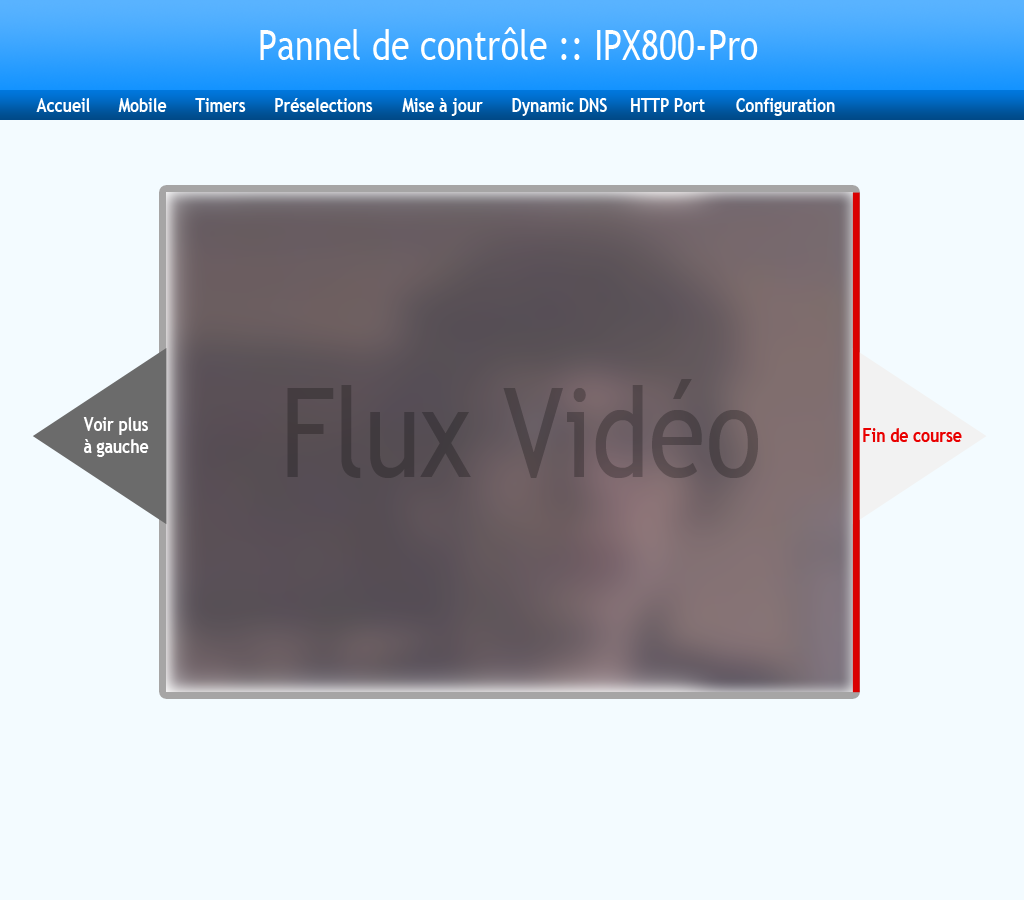
<style>
.page{position:relative;width:1024px;height:900px;background:#f3fbff}
.page>*{position:absolute;margin:0}
.t1{font:41.6px "TrebuchetMS";color:#ffffff;scale:0.82 1}
.t2{font:19.1px "TrebuchetMS-Bold";color:#ffffff;scale:0.82 1}
.t3{font:124.8px "TrebuchetMS";color:#4d4549;scale:0.82 1}
.t4{font:19.1px/21.9px "TrebuchetMS-Bold";color:#ffffff;scale:0.82 1}
.t5{font:19.1px "TrebuchetMS-Bold";color:#e90000;scale:0.82 1}
</style>
<div class="page">
<p class="t1" style="left:260px;top:27px;width:498px;height:33px">Pannel de contrôle :: IPX800-Pro</p>
<p class="t2" style="left:36px;top:98px;width:54px;height:14px">Accueil</p>
<p class="t2" style="left:118px;top:98px;width:49px;height:14px">Mobile</p>
<p class="t2" style="left:195px;top:98px;width:51px;height:14px">Timers</p>
<p class="t2" style="left:275px;top:98px;width:98px;height:14px">Préselections</p>
<p class="t2" style="left:402px;top:98px;width:81px;height:18px">Mise à jour</p>
<p class="t2" style="left:512px;top:98px;width:95px;height:18px">Dynamic DNS</p>
<p class="t2" style="left:631px;top:98px;width:74px;height:14px">HTTP Port</p>
<p class="t2" style="left:736px;top:98px;width:99px;height:18px">Configuration</p>
<p class="t3" style="left:287px;top:379px;width:471px;height:99px">Flux Vidéo</p>
<p class="t4" style="left:83px;top:417px;width:66px;height:40px;text-align:center">Voir plus<br>à gauche</p>
<p class="t5" style="left:863px;top:428px;width:99px;height:14px">Fin de course</p>
</div>
